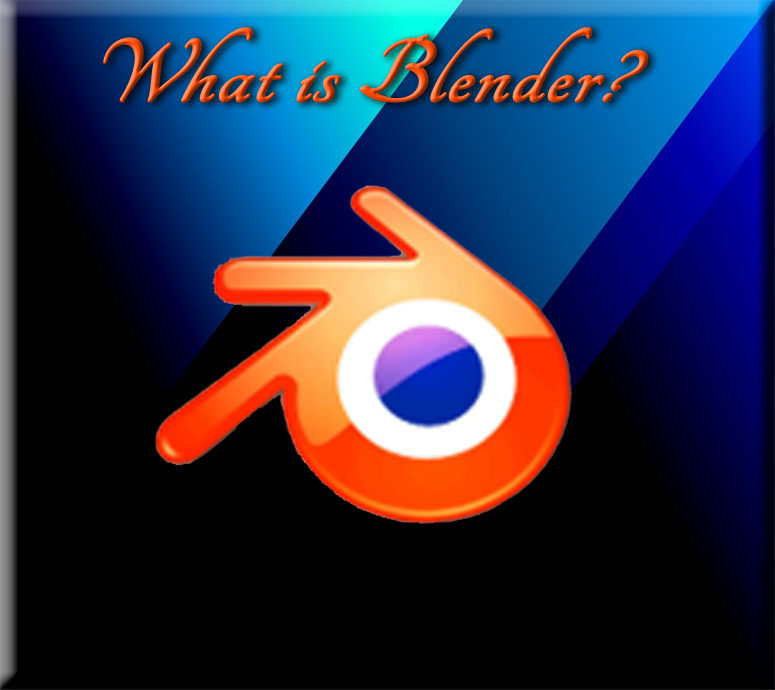
<style>
.page{position:relative;width:775px;height:690px;background:#000000}
.page>*{position:absolute;margin:0}
.t1{font:95.8px "Tangerine-Bold";font-weight:bold;font-style:italic;scale:1.08 1}
</style>
<div class="page">
<p class="t1" style="left:103px;top:27px;width:546px;height:76px">What is Blender?</p>
</div>
